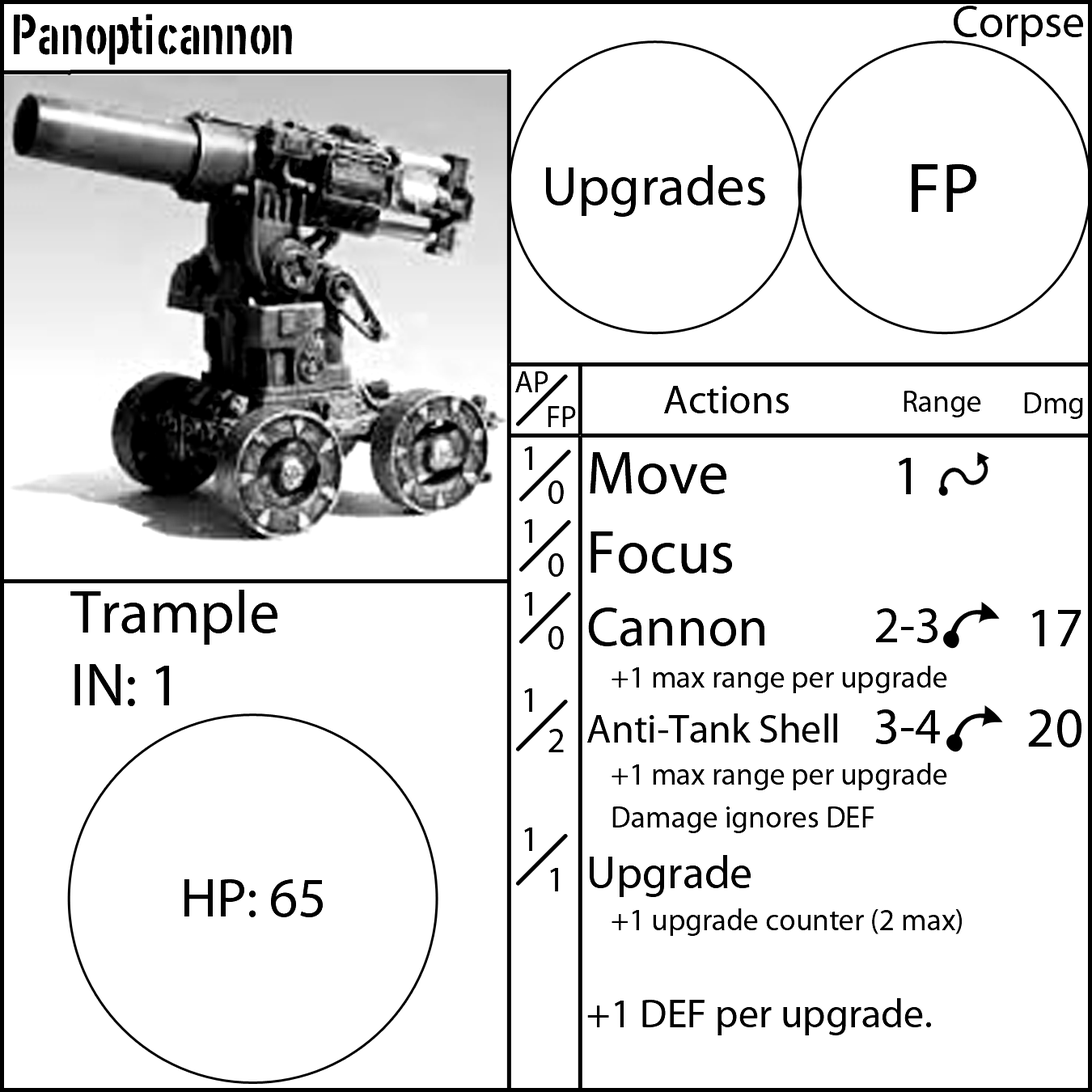
<style>
.page{position:relative;width:1092px;height:1092px;background:#ffffff}
.page>*{position:absolute;margin:0}
.t1{font:55.6px "XXIISTRAIGHT-ARMY";color:#000000}
.t2{font:55.6px "MyriadPro-Regular";color:#000000}
.t3{font:70.8px "MyriadPro-Regular";color:#000000}
.t4{font:30.3px "MyriadPro-Regular";color:#000000}
.t5{font:40.4px "MyriadPro-Regular";color:#000000}
.t6{font:35.4px "MyriadPro-Regular";color:#000000}
.t7{font:60.7px "MyriadPro-Regular";color:#000000}
.t8{font:45.5px "MyriadPro-Regular";color:#000000}
.t9{font:50.6px "MyriadPro-Regular";color:#000000}
</style>
<div class="page">
<p class="t1" style="left:13px;top:14px;width:279px;height:51px">Panopticannon</p>
<p class="t2" style="left:546px;top:165px;width:219px;height:52px">Upgrades</p>
<p class="t3" style="left:912px;top:164px;width:64px;height:48px">FP</p>
<p class="t4" style="left:515px;top:371px;width:33px;height:21px">AP</p>
<p class="t5" style="left:664px;top:386px;width:125px;height:27px">Actions</p>
<p class="t4" style="left:904px;top:391px;width:77px;height:26px">Range</p>
<p class="t4" style="left:1024px;top:392px;width:59px;height:27px">Dmg</p>
<p class="t4" style="left:548px;top:406px;width:28px;height:21px">FP</p>
<p class="t6" style="left:524px;top:447px;width:8px;height:404px">1<br>1<br>1<br>1 <br>1</p>
<p class="t4" style="left:587px;top:452px;width:375px;height:583px"><span class="t7">Move<br>Focus<br></span><span class="t2">Cannon<br></span> +1 max range per upgrade<br><span class="t5">Anti-Tank Shell<br></span> +1 max range per upgrade<br> Damage ignores DEF<br><span class="t8">Upgrade<br></span> +1 upgrade counter (2 max)<br><br><span class="t5">+1 DEF per upgrade.</span></p>
<p class="t9" style="left:875px;top:458px;width:65px;height:286px;text-align:center"><span class="t2">1<br><br></span>2-3<br>3-4</p>
<p class="t6" style="left:548px;top:480px;width:16px;height:411px">0<br>0<br>0 <br>2 <br>1</p>
<p class="t7" style="left:70px;top:590px;width:207px;height:116px">Trample<br>IN: 1</p>
<p class="t2" style="left:1028px;top:610px;width:53px;height:137px;text-align:center">17<br>20</p>
<p class="t2" style="left:184px;top:879px;width:139px;height:38px">HP: 65</p>
</div>
